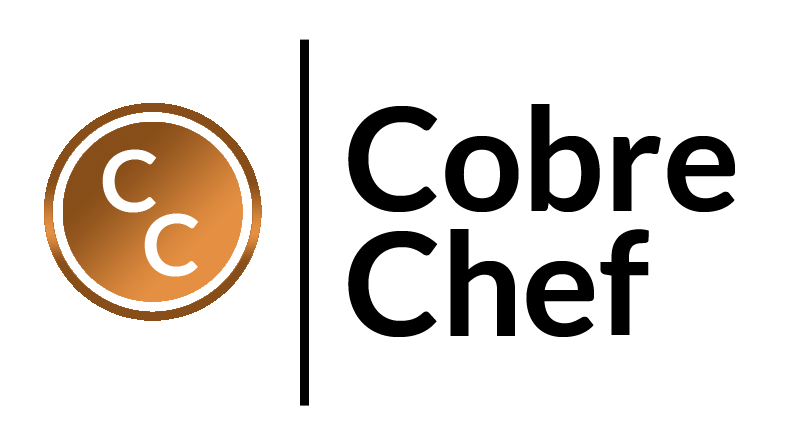
<style>
.page{position:relative;width:800px;height:443px;background:#ffffff}
.page>*{position:absolute;margin:0}
.t1{font:144px/125px "Lato-Bold";color:#000000}
.t2{font:87.3px "Lato-Bold";color:#ffffff}
</style>
<div class="page">
<p class="t1" style="left:348px;top:104px;width:387px;height:233px">Cobre <br>Chef</p>
<p class="t2" style="left:102px;top:149px;width:55px;height:64px">C</p>
<p class="t2" style="left:144px;top:213px;width:55px;height:64px">C</p>
</div>
